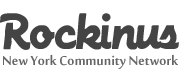
<style>
.page{position:relative;width:180px;height:80px;background:#ffffff}
.page>*{position:absolute;margin:0}
.t1{font:36px "MachineScript";color:#444444}
.t2{font:20px "MoolBoran";color:#666666}
</style>
<div class="page">
<p class="t1" style="left:0px;top:13px;width:179px;height:37px">Rockinus</p>
<p class="t2" style="left:3px;top:54px;width:175px;height:15px">New York Community Network</p>
</div>
